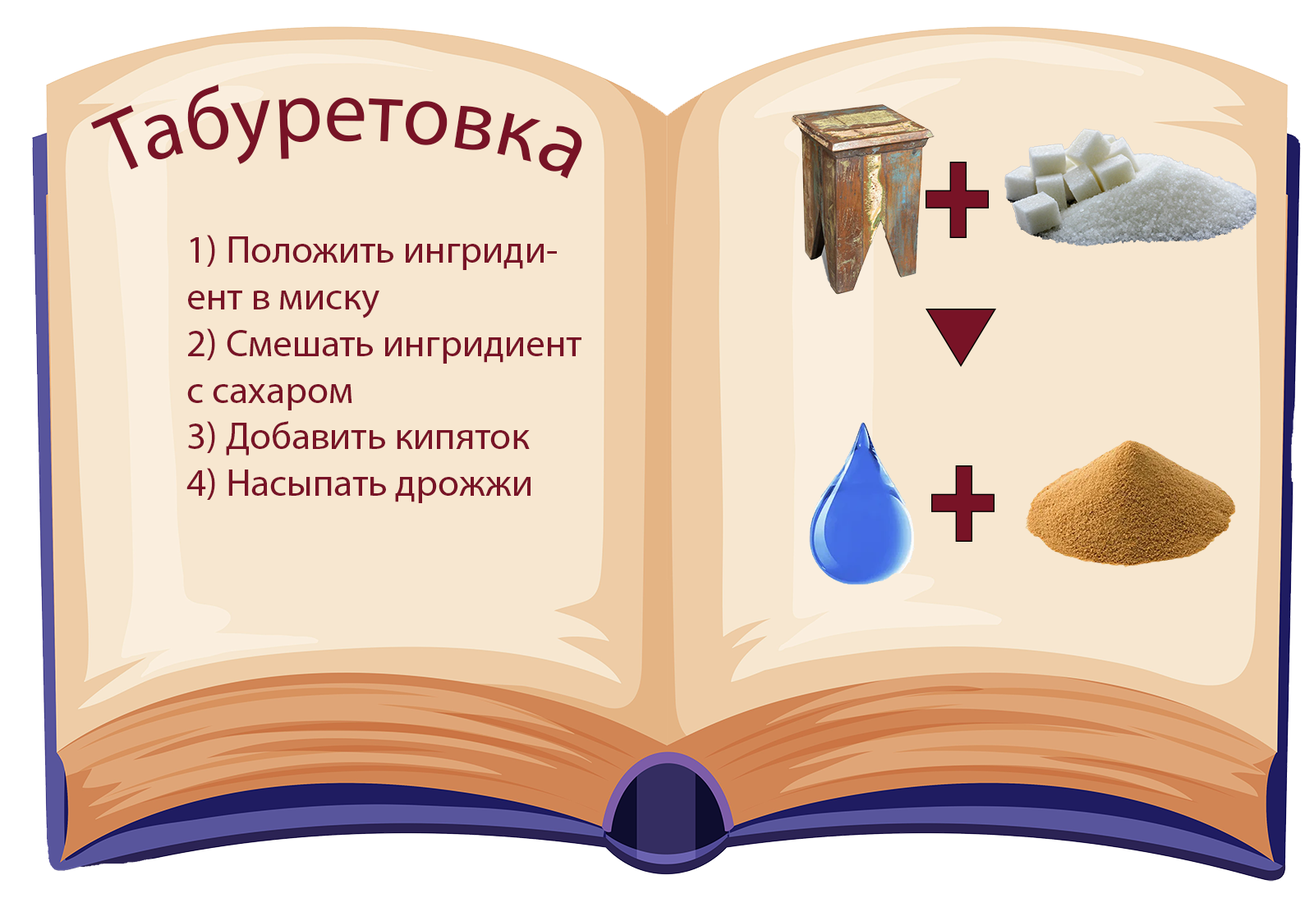
<style>
.page{position:relative;width:1314px;height:907px;background:#f7e7d0}
.page>*{position:absolute;margin:0}
.t1{font:86.9px "MyriadPro-Regular";color:#781326}
.t2{font:93.1px "MyriadPro-Regular";color:#781326}
.t3{font:38.8px "MyriadPro-Regular";color:#781326}
</style>
<div class="page">
<p class="t1" style="left:90px;top:84px;width:492px;height:95px">Табуретовк<span class="t2">а</span></p>
<p class="t3" style="left:186px;top:235px;width:395px;height:268px">1) Положить ингриди-<br>ент в миску<br>2) Смешать ингридиент <br>с сахаром<br>3) Добавить кипяток<br>4) Насыпать дрожжи</p>
</div>
